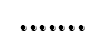
<style>
.page{position:relative;width:100px;height:50px;background:#ffffff}
.page>*{position:absolute;margin:0}
.t1{font:36px "Algerian";color:#000000}
</style>
<div class="page">
<p class="t1" style="left:20px;top:25px;width:65px;height:6px">.......</p>
</div>
